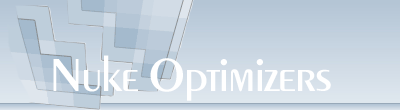
<style>
.page{position:relative;width:400px;height:110px}
.page>*{position:absolute;margin:0}
.t1{font:48px "PeinaudMedium";color:#ffffff}
</style>
<div class="page">
<p class="t1" style="left:53px;top:55px;width:278px;height:46px">Nuke Optimizers</p>
</div>
